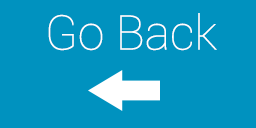
<style>
.page{position:relative;width:256px;height:128px;background:#0092bf}
.page>*{position:absolute;margin:0}
.t1{font:48px "Roboto-Thin";color:#ffffff}
</style>
<div class="page">
<p class="t1" style="left:48px;top:13px;width:169px;height:38px">Go Back</p>
</div>
